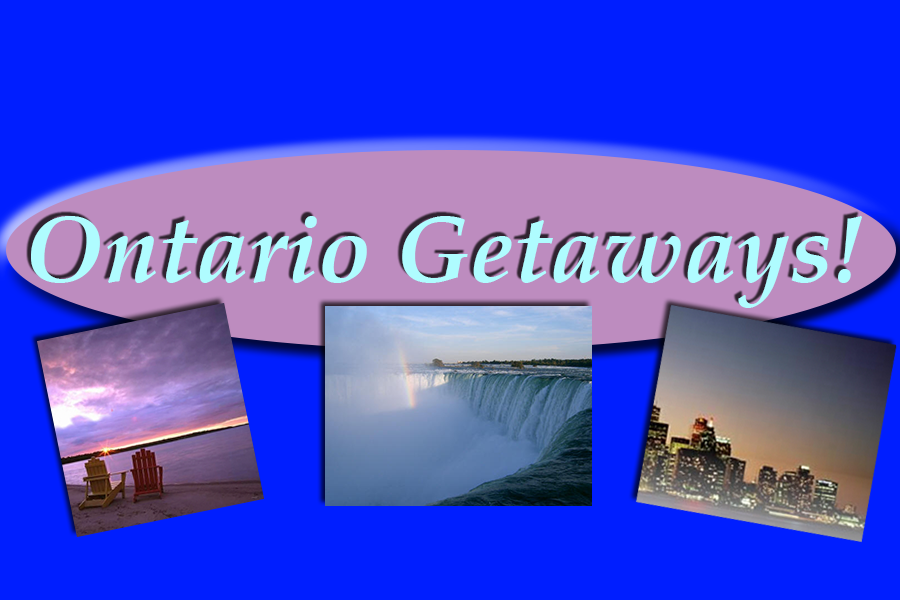
<style>
.page{position:relative;width:900px;height:600px;background:#001eff}
.page>*{position:absolute;margin:0}
.t1{font:96px "BookAntiqua-BoldItalic";color:#affcff}
</style>
<div class="page">
<p class="t1" style="left:31px;top:216px;width:831px;height:92px">Ontario Getaways!</p>
</div>
